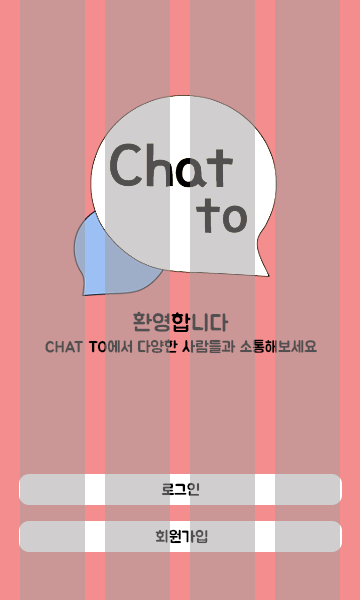
<style>
.page{position:relative;width:360px;height:600px;background:#ca9696}
.page>*{position:absolute;margin:0}
.t1{font:23px "BMJUA";color:#514f4f}
.t2{font:16px "BMJUA";color:#514f4f}
.t3{font:16px "BMJUA"}
</style>
<div class="page">
<p class="t1" style="left:133px;top:311px;width:96px;height:21px">환영합니다</p>
<p class="t2" style="left:45px;top:339px;width:272px;height:15px">CHAT TO에서 다양한 사람들과 소통해보세요</p>
<p class="t3" style="left:161px;top:482px;width:39px;height:14px">로그인</p>
<p class="t3" style="left:155px;top:529px;width:53px;height:15px">회원가입</p>
</div>
